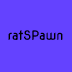
<style>
.page{position:relative;width:72px;height:72px;background:#6442ff}
.page>*{position:absolute;margin:0}
.t1{font:12.5px "NovaFlat";color:#000000}
</style>
<div class="page">
<p class="t1" style="left:8px;top:30px;width:55px;height:10px">ratSPawn</p>
</div>
